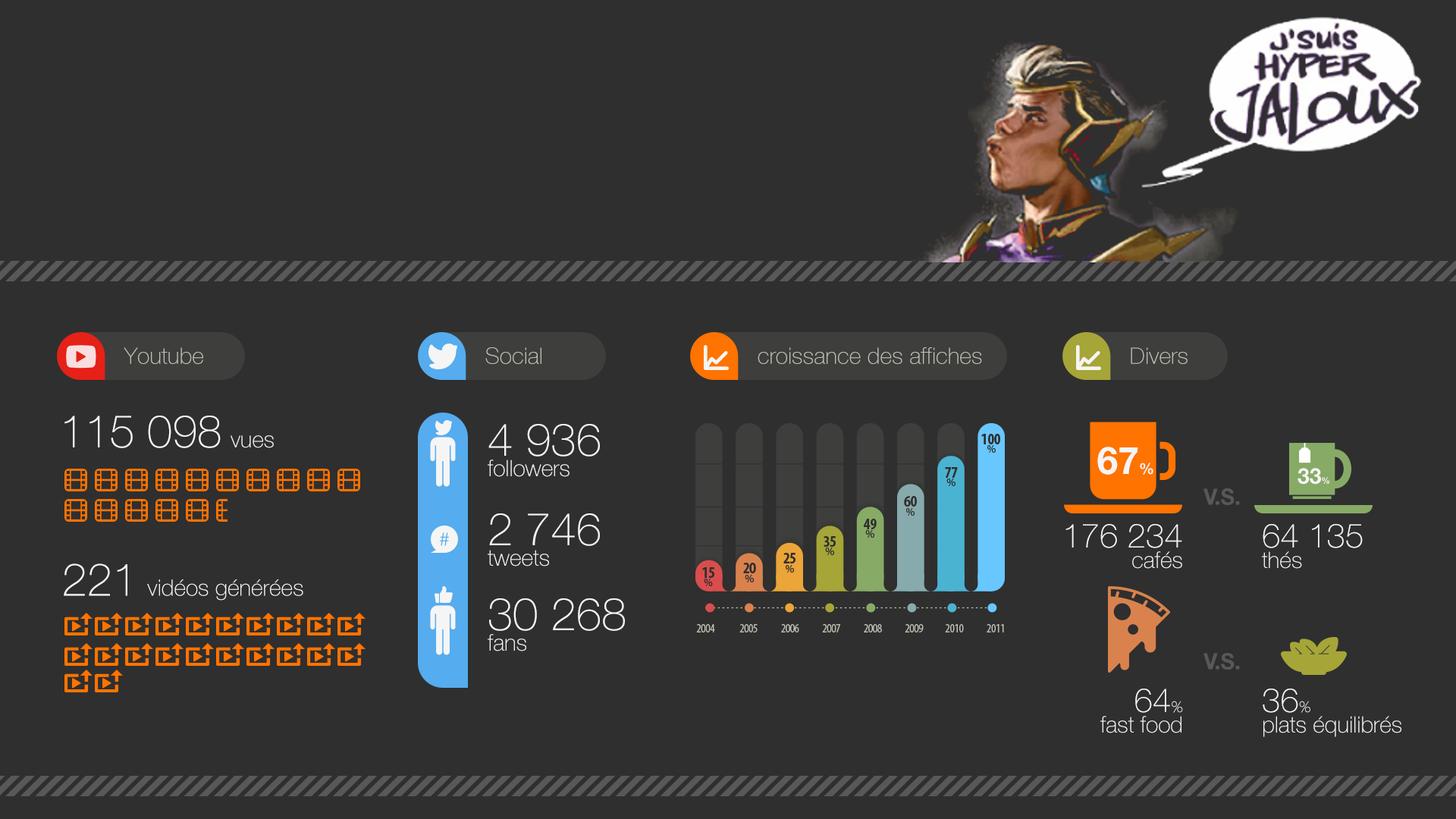
<style>
.page{position:relative;width:1456px;height:819px;background:#2f2f2f}
.page>*{position:absolute;margin:0}
.t1{font:22.7px "HelveNueThin";color:#c3c1b5}
.t2{font:45.5px "HelveNueThin";color:#f5f5f5}
.t3{font:22.7px "HelveNueThin";color:#f5f5f5}
.t4{font:22.7px/20.5px "HelveNueThin";color:#f5f5f5}
.t5{font:37.9px "HelveticaNeueLTStd-Bd";color:#f5f5f5}
.t6{font:15.2px "HelveticaNeueLTStd-Bd";color:#f5f5f5}
.t7{font:21.7px "HelveticaNeueLTStd-Bd";color:#f5f5f5}
.t8{font:8.7px "HelveticaNeueLTStd-Bd";color:#f5f5f5}
.t9{font:22.4px "HelveticaNeueLTStd-Bd";color:#585858;scale:0.97 1}
.t10{font:33.4px "HelveNueThin";color:#f5f5f5}
.t11{font:15.2px "HelveNueThin";color:#f5f5f5}
</style>
<div class="page">
<p class="t1" style="left:124px;top:347px;width:79px;height:17px">Youtube</p>
<p class="t1" style="left:485px;top:347px;width:56px;height:17px">Social</p>
<p class="t1" style="left:758px;top:347px;width:224px;height:17px">croissance des affiches</p>
<p class="t1" style="left:1131px;top:347px;width:57px;height:17px">Divers</p>
<p class="t2" style="left:64px;top:416px;width:210px;height:32px">115 098 <span class="t3">vues</span></p>
<p class="t4" style="left:488px;top:424px;width:112px;height:53px"><span class="t2">4 936<br></span>followers</p>
<p class="t5" style="left:1097px;top:447px;width:56px;height:28px">67<span class="t6">%</span></p>
<p class="t7" style="left:1297px;top:468px;width:32px;height:17px">33<span class="t8">%</span></p>
<p class="t9" style="left:1203px;top:488px;width:37px;height:17px">V.S.</p>
<p class="t4" style="left:488px;top:513px;width:112px;height:53px"><span class="t2">2 746<br></span>tweets</p>
<p class="t10" style="left:1065px;top:524px;width:117px;height:45px;text-align:right">176 234<br><span class="t4">cafés</span></p>
<p class="t10" style="left:1262px;top:524px;width:101px;height:45px">64 135<br><span class="t4">thés</span></p>
<p class="t3" style="left:64px;top:563px;width:239px;height:38px"><span class="t2">221 </span>vidéos générées</p>
<p class="t2" style="left:488px;top:598px;width:137px;height:53px">30 268<br><span class="t4">fans</span></p>
<p class="t9" style="left:1203px;top:653px;width:37px;height:17px">V.S.</p>
<p class="t4" style="left:1100px;top:689px;width:83px;height:44px;text-align:right"><span class="t10">64</span><span class="t11">%<br></span>fast food</p>
<p class="t4" style="left:1263px;top:689px;width:138px;height:48px"><span class="t10">36</span><span class="t11">%<br></span>plats équilibrés</p>
</div>
